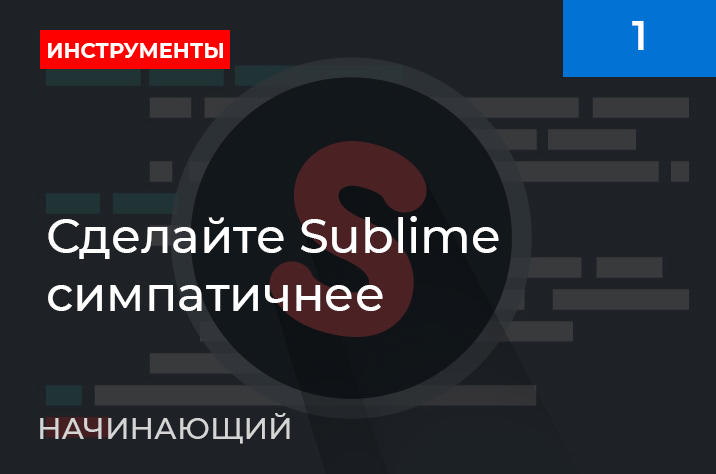
<style>
.page{position:relative;width:716px;height:474px;background:#1e2227}
.page>*{position:absolute;margin:0}
.t1{font:40px "Montserrat-SemiBold";color:#ffffff}
.t2{font:22px "Montserrat-Bold";color:#ffffff;scale:0.95 1}
.t3{font:48px "Montserrat-Medium";color:#ffffff}
.t4{font:30px "Montserrat-Medium";color:#d5d5d5}
</style>
<div class="page">
<p class="t1" style="left:632px;top:21px;width:12px;height:29px">1</p>
<p class="t2" style="left:48px;top:43px;width:175px;height:15px">ИНСТРУМЕНТЫ</p>
<p class="t3" style="left:48px;top:216px;width:451px;height:95px">Сделайте Sublime <br>симпатичнее</p>
<p class="t4" style="left:40px;top:413px;width:250px;height:31px">НАЧИНАЮЩИЙ</p>
</div>
